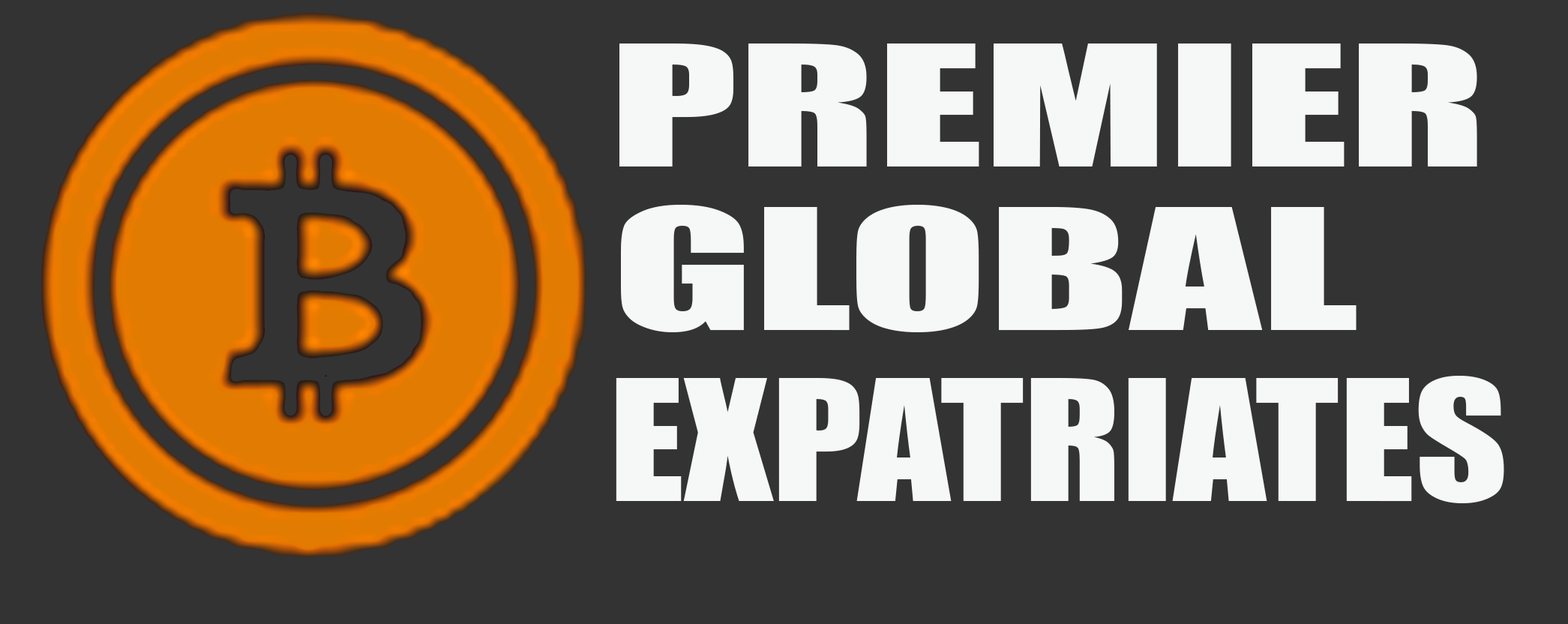
<style>
.page{position:relative;width:1568px;height:624px;background:#333333}
.page>*{position:absolute;margin:0}
.t1{font:155.4px "Impact";color:#f6f7f7;text-transform:uppercase;scale:1.65 1}
.t2{font:155.4px "Impact";color:#f6f7f7;text-transform:uppercase;scale:1.17 1}
</style>
<div class="page">
<p class="t1" style="left:619px;top:43px;width:858px;height:123px">premier</p>
<p class="t1" style="left:621px;top:205px;width:736px;height:127px">GLOBAL</p>
<p class="t2" style="left:616px;top:376px;width:888px;height:127px">expatriates</p>
</div>
